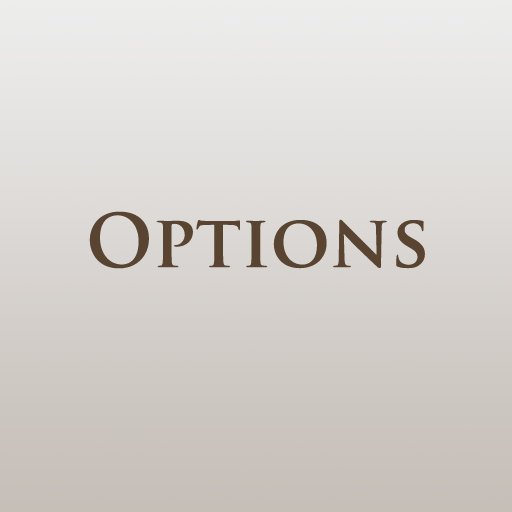
<style>
.page{position:relative;width:512px;height:512px}
.page>*{position:absolute;margin:0}
.t1{font:72px "TrajanPro-Bold";color:#594431}
</style>
<div class="page">
<p class="t1" style="left:89px;top:211px;width:336px;height:58px">Options</p>
</div>
